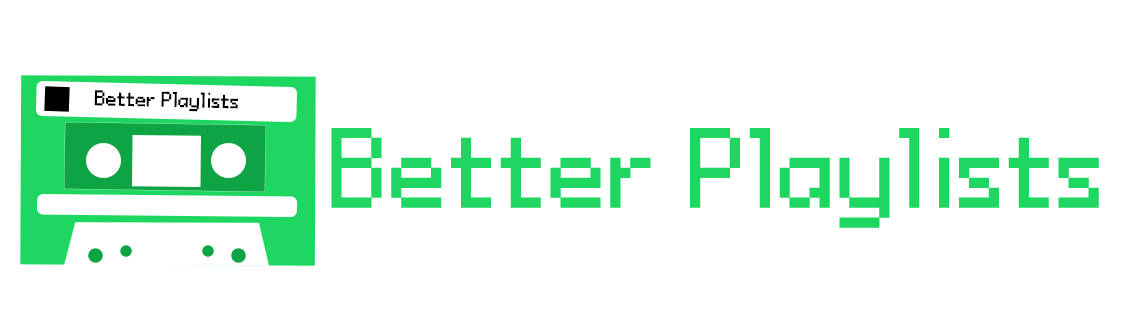
<style>
.page{position:relative;width:1121px;height:326px;background:#ffffff}
.page>*{position:absolute;margin:0}
.t1{font:22.3px "Power-Red-and-Green";color:#000000}
.t2{font:120px "Power-Red-and-Green";color:#1ed760}
</style>
<div class="page">
<p class="t1" style="left:94px;top:90px;width:144px;height:22px;rotate:1deg">Better Playlists</p>
<p class="t2" style="left:331px;top:128px;width:768px;height:100px">Better Playlists</p>
</div>
